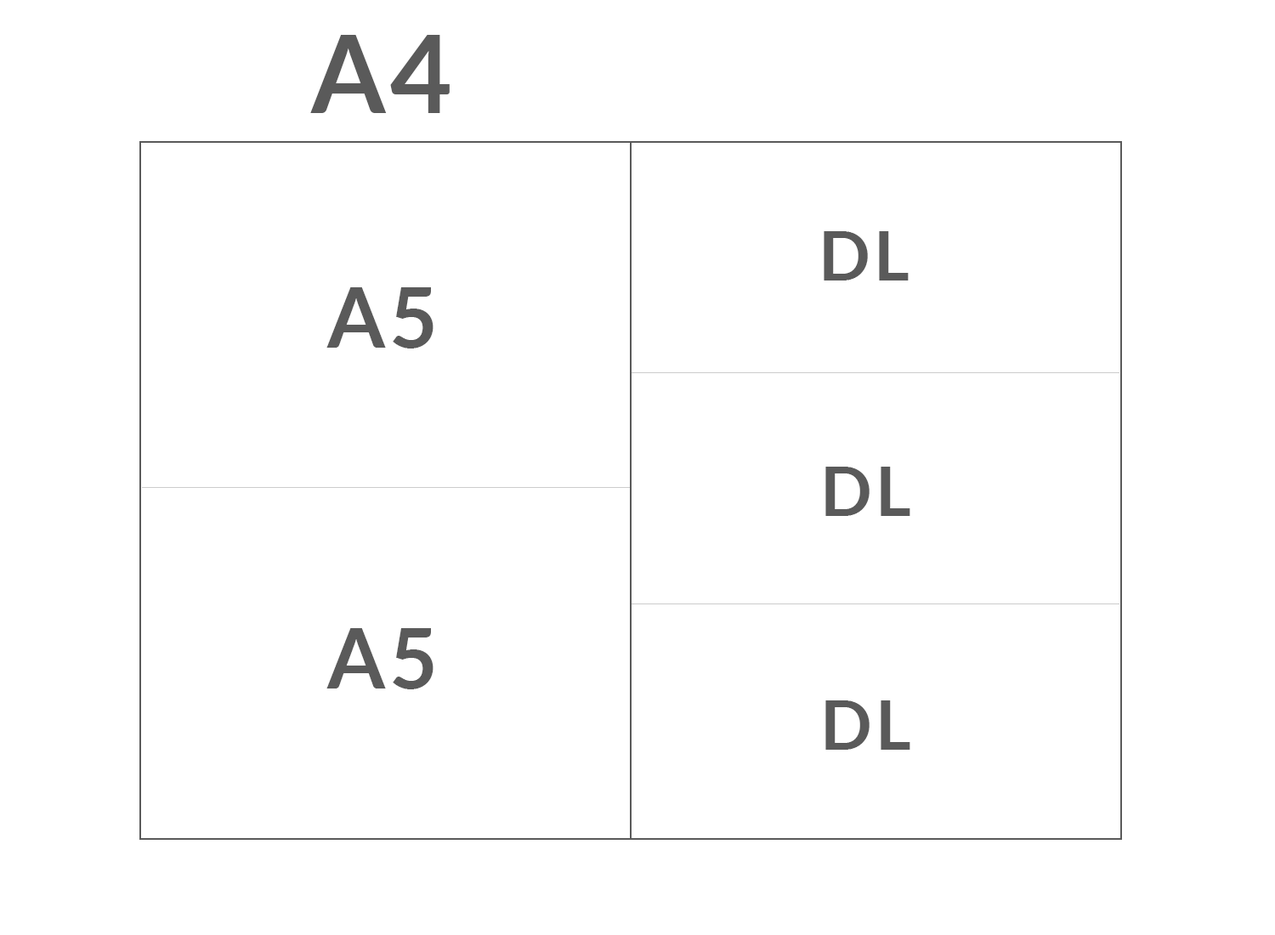
<style>
.page{position:relative;width:1275px;height:935px;background:#ffffff}
.page>*{position:absolute;margin:0}
.t1{font:106.9px "Lato-Bold";letter-spacing:0.05em;color:#5a5a5a}
.t2{font:68.3px "Lato-Bold";letter-spacing:0.05em;color:#5a5a5a}
.t3{font:83.2px "Lato-Bold";letter-spacing:0.05em;color:#5a5a5a}
</style>
<div class="page">
<p class="t1" style="left:310px;top:35px;width:140px;height:78px">A4</p>
<p class="t2" style="left:824px;top:231px;width:85px;height:50px">DL</p>
<p class="t3" style="left:326px;top:287px;width:108px;height:62px">A5</p>
<p class="t2" style="left:825px;top:467px;width:85px;height:49px">DL</p>
<p class="t3" style="left:326px;top:628px;width:108px;height:61px">A5</p>
<p class="t2" style="left:825px;top:700px;width:85px;height:50px">DL</p>
</div>
